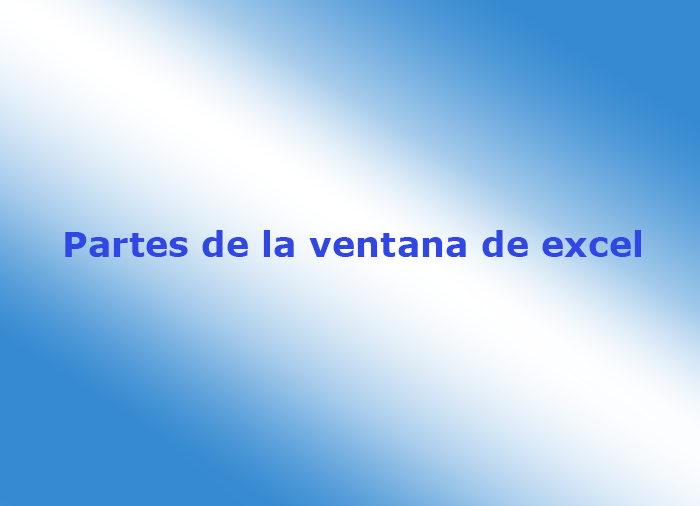
<style>
.page{position:relative;width:700px;height:506px}
.page>*{position:absolute;margin:0}
.t1{font:35.3px "Verdana-Bold";color:#3147e3}
</style>
<div class="page">
<p class="t1" style="left:65px;top:230px;width:576px;height:27px">Partes de la ventana de excel</p>
</div>
